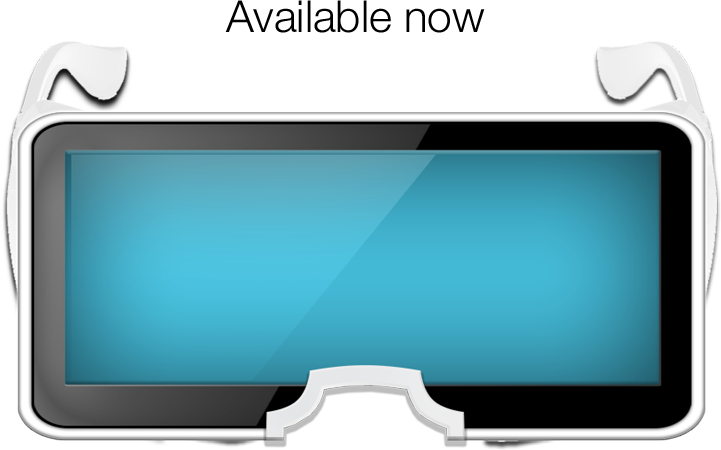
<style>
.page{position:relative;width:721px;height:450px;background:#ffffff}
.page>*{position:absolute;margin:0}
.t1{font:44px "HelveticaNeue-Light";letter-spacing:-0.001em;color:#000000}
</style>
<div class="page">
<p class="t1" style="left:225px;top:0px;width:260px;height:33px">Available now</p>
</div>
